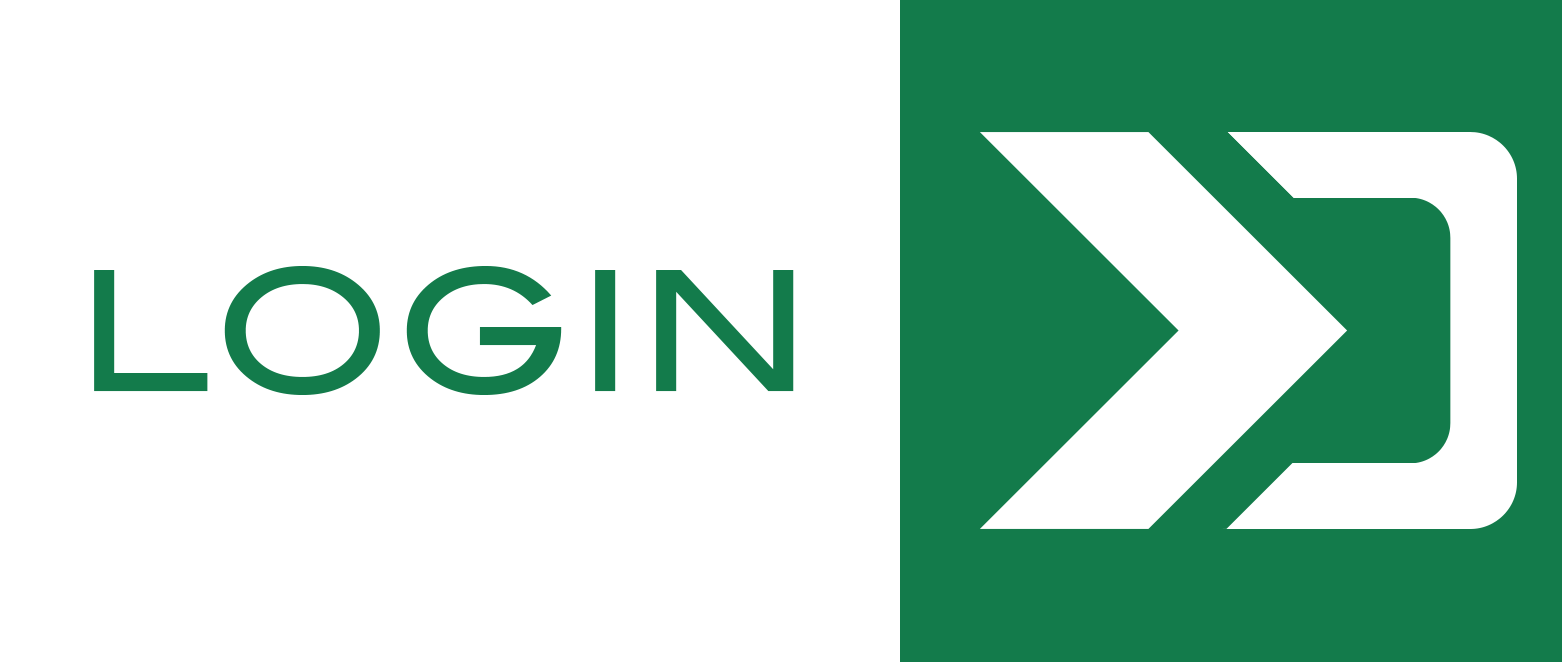
<style>
.page{position:relative;width:1562px;height:662px;background:#ffffff}
.page>*{position:absolute;margin:0}
.t1{font:166.7px "BlairMdITCTTMedium";color:#137b4b}
</style>
<div class="page">
<p class="t1" style="left:94px;top:266px;width:700px;height:129px">LOGIN</p>
</div>
